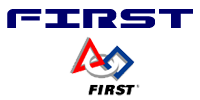
<style>
.page{position:relative;width:200px;height:100px;background:#ffffff}
.page>*{position:absolute;margin:0}
.t1{font:29.8px "Gunship";color:#00006c;scale:1.22 1}
</style>
<div class="page">
<p class="t1" style="left:7px;top:9px;width:186px;height:19px">FIRST</p>
</div>
